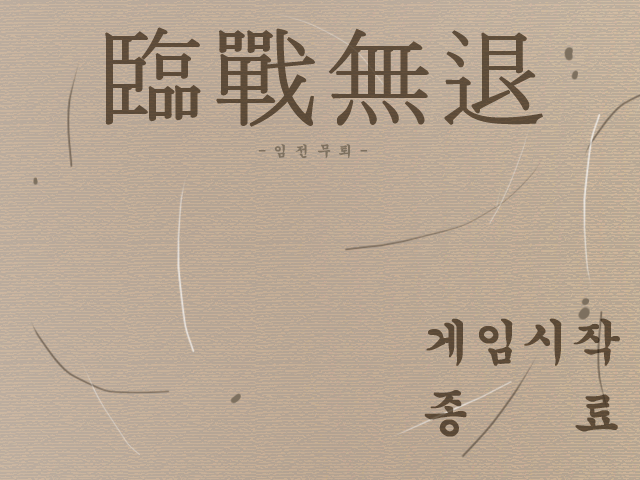
<style>
.page{position:relative;width:640px;height:480px}
.page>*{position:absolute;margin:0}
.t1{font:108.5px "GungsuhChe";color:#5c4b3a;font-weight:bold}
.t2{font:14px "GungsuhChe";color:#7e7160;font-weight:bold}
.t3{font:48px "GungsuhChe";color:#594937;font-weight:bold}
</style>
<div class="page">
<p class="t1" style="left:105px;top:27px;width:438px;height:100px">臨戰無退</p>
<p class="t2" style="left:258px;top:144px;width:110px;height:15px">- 임 전 무 퇴 -</p>
<p class="t3" style="left:424px;top:318px;width:196px;height:119px;text-align:right">게임시작<br><br>종    료</p>
</div>
